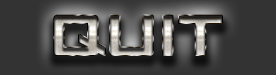
<style>
.page{position:relative;width:276px;height:75px;background:#333333}
.page>*{position:absolute;margin:0}
.t1{font:51.7px "MAZERUNNER";letter-spacing:-0.01em}
</style>
<div class="page">
<p class="t1" style="left:54px;top:15px;width:168px;height:40px">QUIT</p>
</div>
